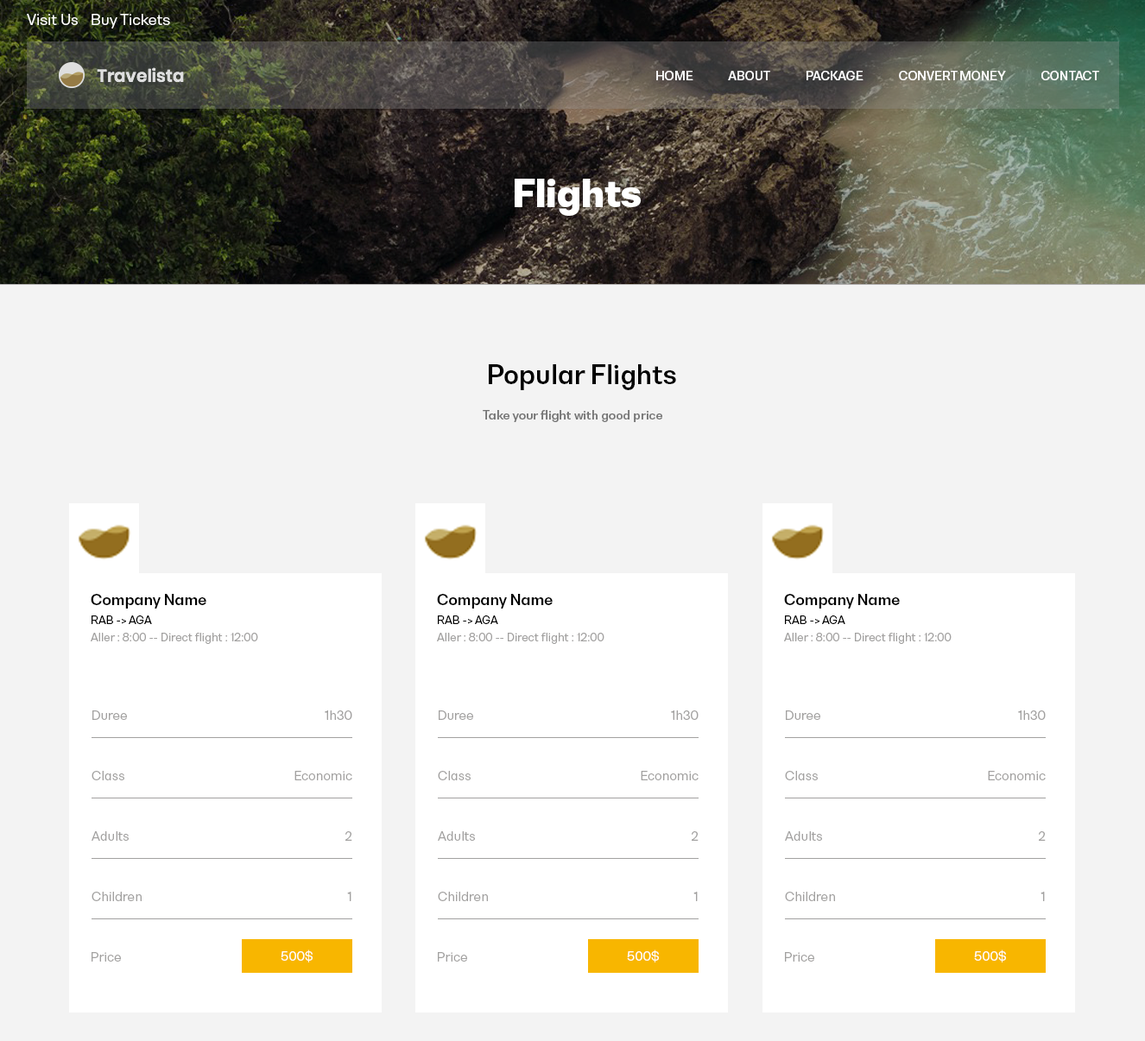
<style>
.page{position:relative;width:1145px;height:1041px;background:#f3f3f3}
.page>*{position:absolute;margin:0}
.t1{font:14.4px "BwNistaGeometricDEMO-Regular";color:#ffffff}
.t2{font:11.5px "BwNistaGeometricDEMO-Bold";color:#ffffff}
.t3{font:36px "BwNistaGeometricDEMO-Black";color:#ffffff}
.t4{font:25.2px "BwNistaGeometricDEMO-Bold";color:#000000}
.t5{font:11.5px "BwNistaGeometricDEMO-Bold";color:#747474}
.t6{font:14.4px "BwNistaGeometricDEMO-Bold";color:#000000}
.t7{font:10.8px "BwNistaGeometricDEMO-Regular";color:#000000}
.t8{font:10.8px "BwNistaGeometricDEMO-Regular";color:#a2a1a0}
.t9{font:12.2px "BwNistaGeometricDEMO-Regular";color:#a2a1a0}
.t10{font:12.2px "BwNistaGeometricDEMO-Regular";color:#ffffff}
</style>
<div class="page">
<p class="t1" style="left:27px;top:14px;width:51px;height:11px">Visit Us</p>
<p class="t1" style="left:92px;top:14px;width:78px;height:14px">Buy Tickets</p>
<p class="t2" style="left:656px;top:71px;width:443px;height:9px">HOME             ABOUT             PACKAGE             CONVERT MONEY             CONTACT</p>
<p class="t3" style="left:515px;top:179px;width:126px;height:37px">Flights</p>
<p class="t4" style="left:489px;top:364px;width:187px;height:26px">Popular Flights</p>
<p class="t5" style="left:483px;top:410px;width:179px;height:12px">Take your flight with good price</p>
<p class="t6" style="left:91px;top:594px;width:115px;height:15px">Company Name</p>
<p class="t6" style="left:437px;top:594px;width:116px;height:15px">Company Name</p>
<p class="t6" style="left:784px;top:594px;width:116px;height:15px">Company Name</p>
<p class="t7" style="left:92px;top:616px;width:60px;height:8px">RAB -&gt; AGA</p>
<p class="t7" style="left:438px;top:616px;width:60px;height:8px">RAB -&gt; AGA</p>
<p class="t7" style="left:785px;top:616px;width:60px;height:8px">RAB -&gt; AGA</p>
<p class="t8" style="left:91px;top:633px;width:167px;height:11px">Aller : 8:00 -- Direct flight : 12:00</p>
<p class="t8" style="left:437px;top:633px;width:167px;height:11px">Aller : 8:00 -- Direct flight : 12:00</p>
<p class="t8" style="left:784px;top:633px;width:168px;height:11px">Aller : 8:00 -- Direct flight : 12:00</p>
<p class="t9" style="left:92px;top:711px;width:35px;height:9px">Duree</p>
<p class="t9" style="left:325px;top:711px;width:27px;height:9px">1h30</p>
<p class="t9" style="left:439px;top:711px;width:34px;height:9px">Duree</p>
<p class="t9" style="left:671px;top:711px;width:28px;height:9px">1h30</p>
<p class="t9" style="left:786px;top:711px;width:34px;height:9px">Duree</p>
<p class="t9" style="left:1018px;top:711px;width:28px;height:9px">1h30</p>
<p class="t9" style="left:92px;top:771px;width:32px;height:10px">Class</p>
<p class="t9" style="left:294px;top:771px;width:58px;height:10px">Economic</p>
<p class="t9" style="left:438px;top:771px;width:33px;height:10px">Class</p>
<p class="t9" style="left:641px;top:771px;width:58px;height:10px">Economic</p>
<p class="t9" style="left:785px;top:771px;width:33px;height:10px">Class</p>
<p class="t9" style="left:988px;top:771px;width:58px;height:10px">Economic</p>
<p class="t9" style="left:92px;top:832px;width:37px;height:9px">Adults</p>
<p class="t9" style="left:345px;top:832px;width:7px;height:9px">2</p>
<p class="t9" style="left:438px;top:832px;width:37px;height:9px">Adults</p>
<p class="t9" style="left:692px;top:832px;width:7px;height:9px">2</p>
<p class="t9" style="left:785px;top:832px;width:37px;height:9px">Adults</p>
<p class="t9" style="left:1039px;top:832px;width:7px;height:9px">2</p>
<p class="t9" style="left:92px;top:892px;width:50px;height:10px">Children</p>
<p class="t9" style="left:347px;top:892px;width:4px;height:10px">1</p>
<p class="t9" style="left:438px;top:892px;width:50px;height:10px">Children</p>
<p class="t9" style="left:693px;top:892px;width:5px;height:10px">1</p>
<p class="t9" style="left:785px;top:892px;width:50px;height:10px">Children</p>
<p class="t9" style="left:1041px;top:892px;width:4px;height:10px">1</p>
<p class="t9" style="left:92px;top:952px;width:29px;height:10px">Price</p>
<p class="t10" style="left:281px;top:950px;width:32px;height:13px">500$</p>
<p class="t9" style="left:438px;top:952px;width:29px;height:10px">Price</p>
<p class="t10" style="left:627px;top:950px;width:32px;height:13px">500$</p>
<p class="t9" style="left:785px;top:952px;width:29px;height:10px">Price</p>
<p class="t10" style="left:974px;top:950px;width:32px;height:13px">500$</p>
</div>
